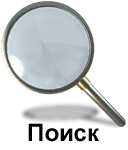
<style>
.page{position:relative;width:128px;height:150px;background:#ffffff}
.page>*{position:absolute;margin:0}
.t1{font:24px "Arial-BoldMT";color:#000000}
</style>
<div class="page">
<p class="t1" style="left:28px;top:123px;width:71px;height:19px">Поиск</p>
</div>
